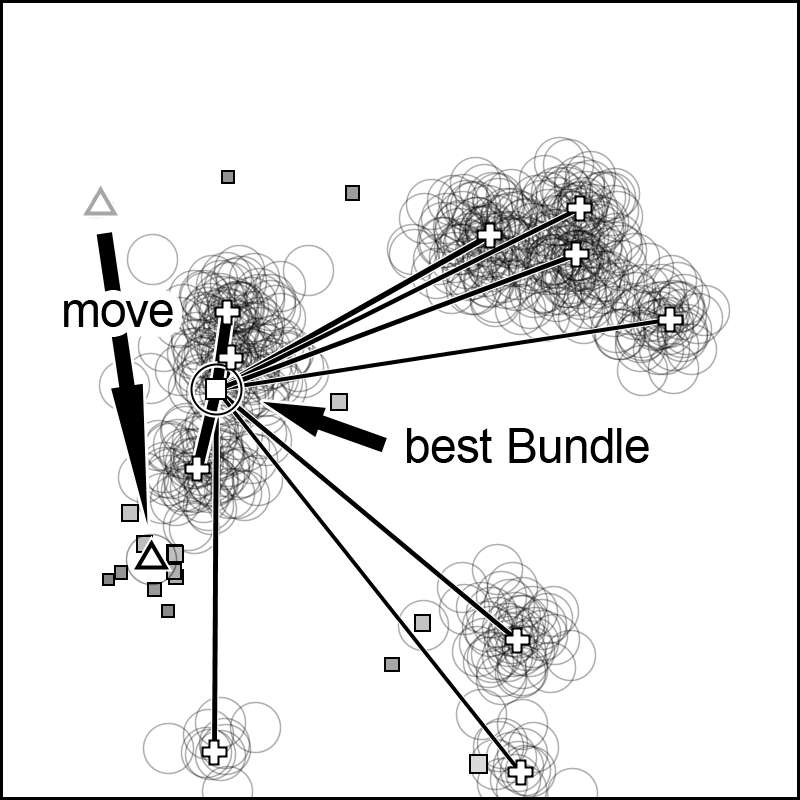
<style>
.page{position:relative;width:800px;height:800px;background:#ffffff}
.page>*{position:absolute;margin:0}
.t1{font:48px "ArialMT";color:#000000}
</style>
<div class="page">
<p class="t1" style="left:64px;top:300px;width:109px;height:27px">move</p>
<p class="t1" style="left:407px;top:428px;width:242px;height:35px">best Bundle</p>
</div>
